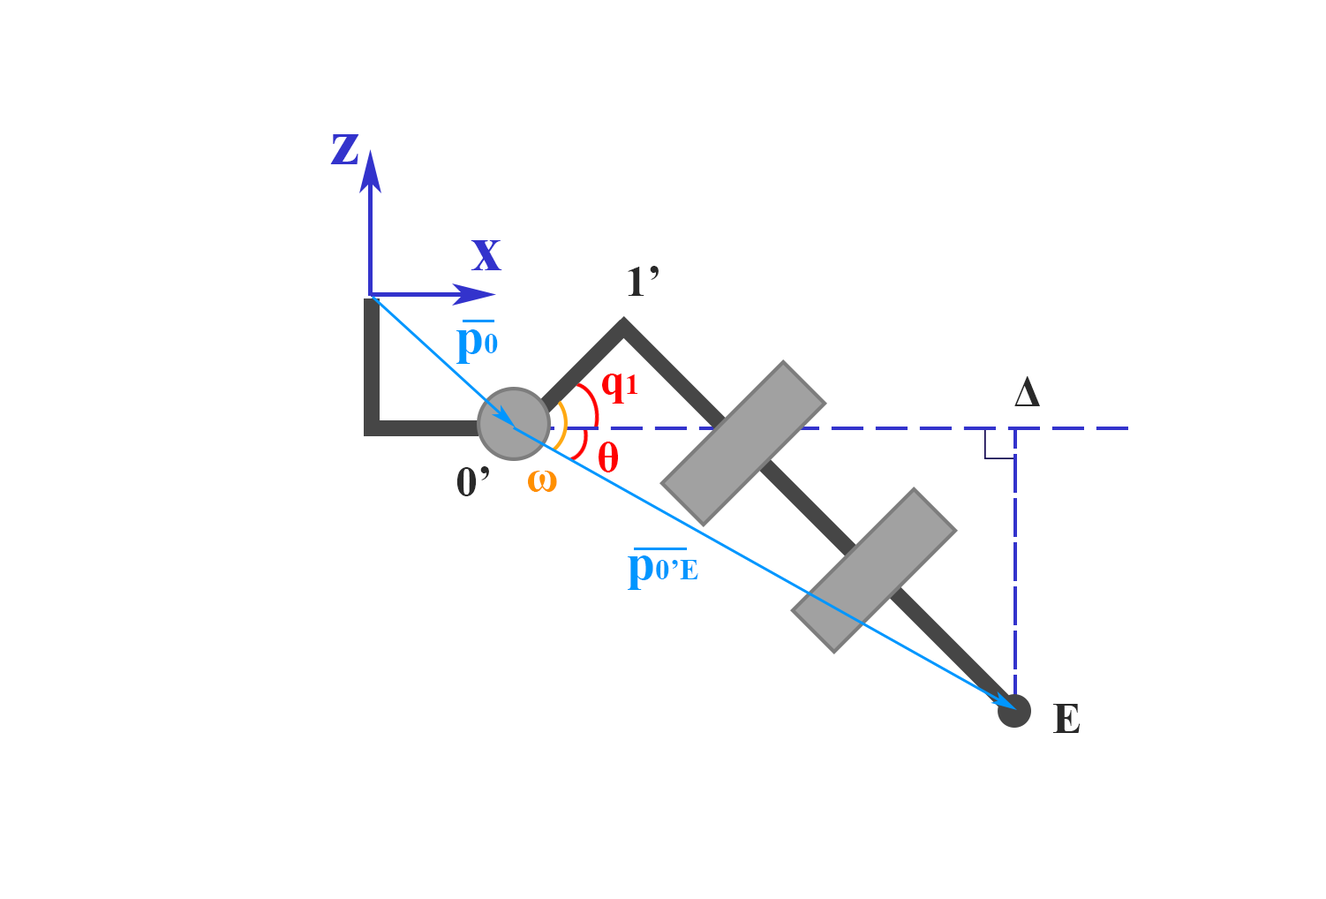
<style>
.page{position:relative;width:1326px;height:899px;background:#ffffff}
.page>*{position:absolute;margin:0}
.t1{font:66.2px "TimesNewRomanPS-BoldMT";color:#3333cc}
.t2{font:10.6px "TimesNewRomanPS-BoldMT";color:#292929}
.t3{font:51.5px "TimesNewRomanPS-BoldMT";color:#0096ff}
.t4{font:29.4px "TimesNewRomanPS-BoldMT";color:#0096ff}
.t5{font:44.2px "TimesNewRomanPS-BoldMT";color:#ff0202}
.t6{font:29.4px "TimesNewRomanPS-BoldMT";color:#ff0202}
.t7{font:10.6px "TimesNewRomanPS-BoldMT";color:#ff9000}
</style>
<div class="page">
<p class="t1" style="left:330px;top:134px;width:29px;height:30px">z</p>
<p class="t1" style="left:471px;top:240px;width:31px;height:30px">x</p>
<p class="t2" style="left:628px;top:266px;width:31px;height:30px;text-align:right">‘1</p>
<p class="t3" style="left:457px;top:329px;width:41px;height:35px">p<span class="t4">0</span></p>
<p class="t5" style="left:602px;top:374px;width:36px;height:30px">q<span class="t6">1</span></p>
<p class="t2" style="left:1015px;top:376px;width:25px;height:30px;text-align:right">Δ</p>
<p class="t5" style="left:599px;top:442px;width:19px;height:30px">θ</p>
<p class="t2" style="left:457px;top:466px;width:32px;height:30px;text-align:right">‘0</p>
<p class="t7" style="left:528px;top:471px;width:29px;height:21px;text-align:right">ω</p>
<p class="t4" style="left:628px;top:555px;width:71px;height:35px"><span class="t3">p</span>0’E</p>
<p class="t2" style="left:1054px;top:704px;width:27px;height:29px;text-align:right">Ε</p>
</div>
